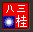
<style>
.page{position:relative;width:33px;height:32px;background:#f20000}
.page>*{position:absolute;margin:0}
.t1{font:10.4px "SimSun";color:#ffffff}
.t2{font:11.7px "SimSun";color:#ffffff}
</style>
<div class="page">
<p class="t1" style="left:6px;top:5px;width:19px;height:8px">八三</p>
<p class="t2" style="left:16px;top:15px;width:11px;height:12px">桂</p>
</div>
